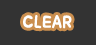
<style>
.page{position:relative;width:96px;height:45px;background:#333333}
.page>*{position:absolute;margin:0}
.t1{font:22px "KoreanCT-R";color:#ffffff}
</style>
<div class="page">
<p class="t1" style="left:23px;top:15px;width:49px;height:14px">CLEAR</p>
</div>
